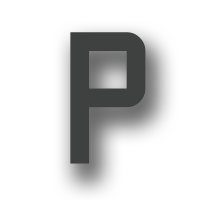
<style>
.page{position:relative;width:215px;height:200px;background:#ffffff}
.page>*{position:absolute;margin:0}
.t1{font:150px "Manteka";color:#3f4040}
</style>
<div class="page">
<p class="t1" style="left:70px;top:32px;width:76px;height:132px">P</p>
</div>
